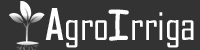
<style>
.page{position:relative;width:200px;height:50px;background:#333333}
.page>*{position:absolute;margin:0}
.t1{font:41.7px "AgencyFB-Reg";color:#ffffff}
.t2{font:41.7px "AgencyFB-Bold";color:#ffffff}
.t3{font:41.7px "ComicSansMS";color:#ffffff}
</style>
<div class="page">
<p class="t1" style="left:45px;top:8px;width:62px;height:40px"><span class="t2">A</span>gro</p>
<p class="t1" style="left:108px;top:9px;width:86px;height:39px"><span class="t3">I</span>rriga</p>
</div>
